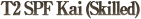
<style>
.page{position:relative;width:141px;height:19px;background:#ffffff}
.page>*{position:absolute;margin:0}
.t1{font:18px "RyuminPro-ExBold";letter-spacing:-0.09em;color:#4a3f32;font-weight:bold;scale:0.9 1}
</style>
<div class="page">
<p class="t1" style="left:0px;top:1px;width:140px;height:18px">T2 SPF Kai (Skilled)</p>
</div>
